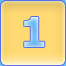
<style>
.page{position:relative;width:66px;height:66px}
.page>*{position:absolute;margin:0}
.t1{font:41px "Tahoma-Bold"}
</style>
<div class="page">
<p class="t1" style="left:24px;top:17px;width:21px;height:30px">1</p>
<p class="t1" style="left:24px;top:17px;width:21px;height:30px">1</p>
</div>
